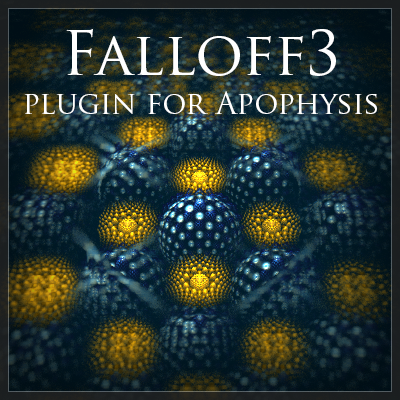
<style>
.page{position:relative;width:400px;height:400px}
.page>*{position:absolute;margin:0}
.t1{font:60px "TrajanPro-Regular";color:#ffffff}
.t2{font:30px "TrajanPro-Regular";color:#ffffff}
</style>
<div class="page">
<p class="t1" style="left:66px;top:29px;width:270px;height:47px">Falloff3</p>
<p class="t2" style="left:24px;top:91px;width:353px;height:23px">plugin for Apophysis</p>
</div>
